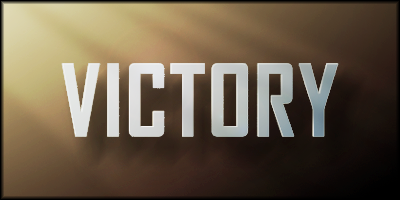
<style>
.page{position:relative;width:400px;height:200px}
.page>*{position:absolute;margin:0}
.t1{font:94.6px "AgencyFB-Bold";font-variant:small-caps;font-weight:bold;scale:0.96 1}
</style>
<div class="page">
<p class="t1" style="left:62px;top:63px;width:276px;height:74px">VICTORY</p>
</div>
